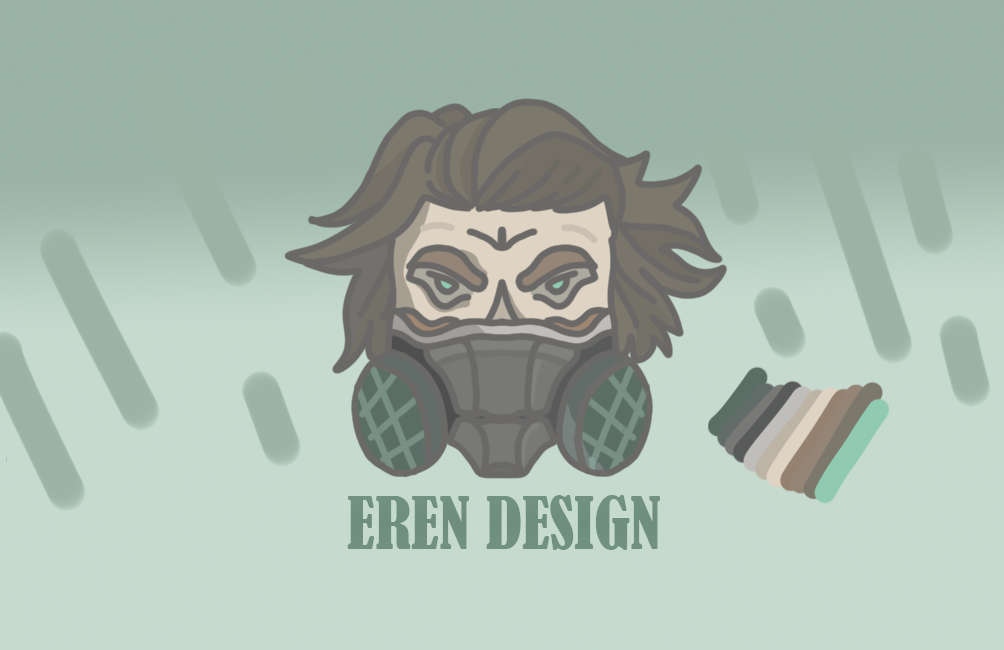
<style>
.page{position:relative;width:1004px;height:650px}
.page>*{position:absolute;margin:0}
.t1{font:66.7px "BernardMT-Condensed";color:#729280}
</style>
<div class="page">
<p class="t1" style="left:347px;top:495px;width:313px;height:55px">EREN DESIGN</p>
</div>
